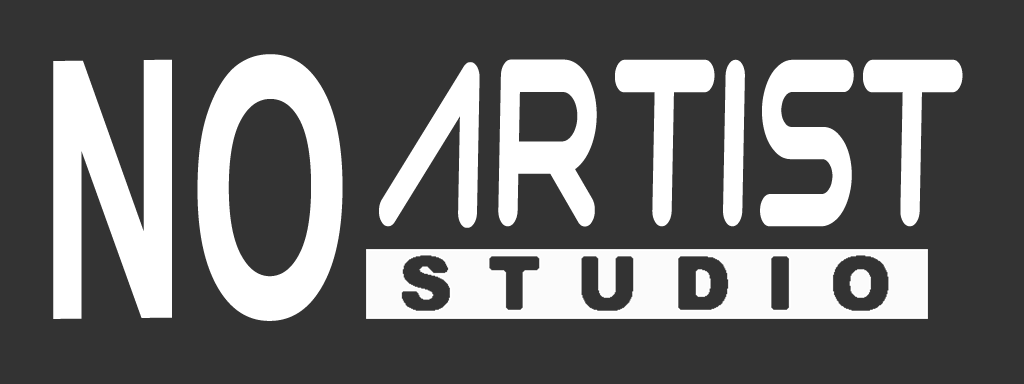
<style>
.page{position:relative;width:1024px;height:384px;background:#333333}
.page>*{position:absolute;margin:0}
.t1{font:360px "Arial-BoldMT";color:#ffffff;scale:0.58 1}
.t2{font:229.9px "Syntha";color:#ffffff;scale:0.6 1}
</style>
<div class="page">
<p class="t1" style="left:53px;top:54px;width:290px;height:267px;rotate:-1deg">NO</p>
<p class="t2" style="left:379px;top:59px;width:584px;height:169px">ARTIST</p>
</div>
